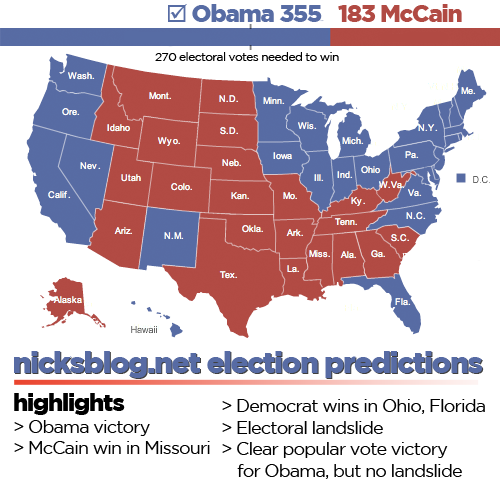
<style>
.page{position:relative;width:500px;height:500px;background:#ffffff}
.page>*{position:absolute;margin:0}
.t1{font:24px "GothamBlack";letter-spacing:-0.05em;color:#576ca4}
.t2{font:24px "Wingdings-Regular";letter-spacing:-0.05em;color:#576ca4}
.t3{font:24px "GothamBlack";letter-spacing:-0.05em;color:#b14a43}
.t4{font:12px "GothamBook";letter-spacing:-0.05em;color:#000000}
.t5{font:30px "GothamBlack";letter-spacing:-0.05em;color:#576ba4}
.t6{font:18px "GothamBook";letter-spacing:-0.05em;color:#000000}
.t7{font:24px "GothamBlack";letter-spacing:-0.05em;color:#000000}
</style>
<div class="page">
<p class="t1" style="left:168px;top:4px;width:154px;height:18px"><span class="t2">þ</span> Obama 355</p>
<p class="t3" style="left:338px;top:4px;width:124px;height:18px">183 McCain</p>
<p class="t4" style="left:155px;top:52px;width:184px;height:9px">270 electoral votes needed to win</p>
<p class="t5" style="left:14px;top:351px;width:469px;height:27px">nicksblog.net election predictions</p>
<p class="t6" style="left:14px;top:393px;width:196px;height:61px"><span class="t7">highlights<br></span>&gt; Obama victory<br>&gt; McCain win in Missouri</p>
<p class="t6" style="left:222px;top:399px;width:263px;height:80px">&gt; Democrat wins in Ohio, Florida<br>&gt; Electoral landslide<br>&gt; Clear popular vote victory<br>for Obama, but no landslide</p>
</div>
